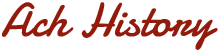
<style>
.page{position:relative;width:220px;height:50px;background:#ffffff}
.page>*{position:absolute;margin:0}
.t1{font:48px "Damion";color:#931b0c}
</style>
<div class="page">
<p class="t1" style="left:2px;top:2px;width:216px;height:48px">Ach History</p>
</div>
